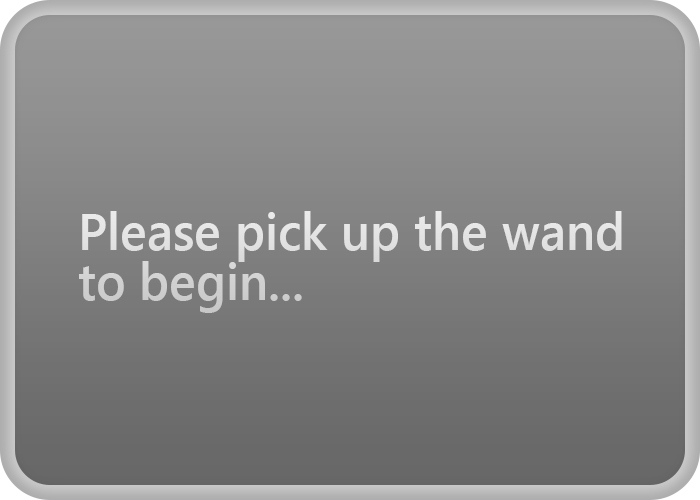
<style>
.page{position:relative;width:700px;height:500px}
.page>*{position:absolute;margin:0}
.t1{font:52.1px/50px "SegoeUI-Semibold";color:#e2e2e2;scale:0.96 1}
</style>
<div class="page">
<p class="t1" style="left:79px;top:211px;width:543px;height:102px">Please pick up the wand<br>to begin...</p>
</div>
